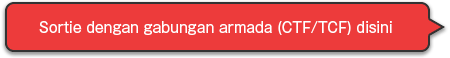
<style>
.page{position:relative;width:450px;height:58px;background:#ed3b3b}
.page>*{position:absolute;margin:0}
.t1{font:14px "GothicMB101Pro-Regular";color:#ffffff}
</style>
<div class="page">
<p class="t1" style="left:39px;top:21px;width:353px;height:14px">Sortie dengan gabungan armada (CTF/TCF) disini</p>
</div>
